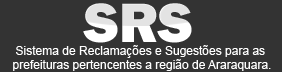
<style>
.page{position:relative;width:282px;height:72px;background:#333333}
.page>*{position:absolute;margin:0}
.t1{font:57.1px "FranklinGothic-Heavy"}
.t2{font:12px "ArialMT";color:#ffffff}
</style>
<div class="page">
<p class="t1" style="left:83px;top:3px;width:109px;height:40px">SRS</p>
<p class="t2" style="left:13px;top:45px;width:258px;height:26px;text-align:center">Sistema de Reclamações e Sugestões para as <br>prefeituras pertencentes a região de Araraquara.</p>
</div>
